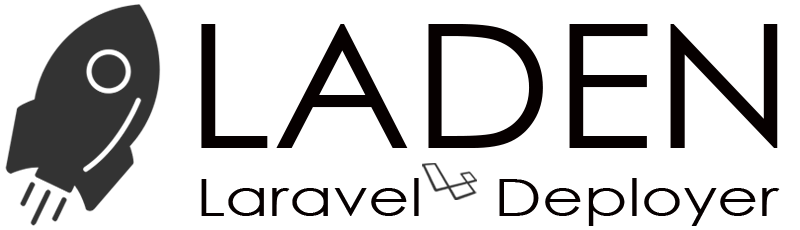
<style>
.page{position:relative;width:800px;height:230px;background:#ffffff}
.page>*{position:absolute;margin:0}
.t1{font:173.3px "CenturyGothic";color:#060000;scale:1.09 1}
.t2{font:52.4px "CenturyGothic";color:#060000;scale:1.23 1}
</style>
<div class="page">
<p class="t1" style="left:201px;top:24px;width:577px;height:124px">LADEN</p>
<p class="t2" style="left:201px;top:178px;width:579px;height:48px">Laravel    Deployer</p>
</div>
